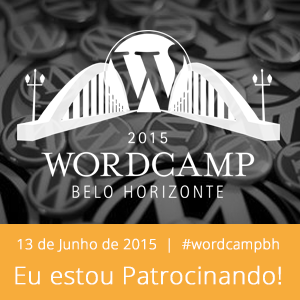
<style>
.page{position:relative;width:300px;height:300px;background:#f7ac3b}
.page>*{position:absolute;margin:0}
.t1{font:14px "OpenSans-Light";letter-spacing:0.01em;color:#fefefe;font-weight:bold}
.t2{font:24px "OpenSans-Light";letter-spacing:0.01em;color:#fefefe;font-weight:bold}
</style>
<div class="page">
<p class="t1" style="left:17px;top:238px;width:262px;height:15px">13 de Junho de 2015  |  #wordcampbh</p>
<p class="t2" style="left:15px;top:265px;width:266px;height:20px">Eu estou Patrocinando!</p>
</div>
